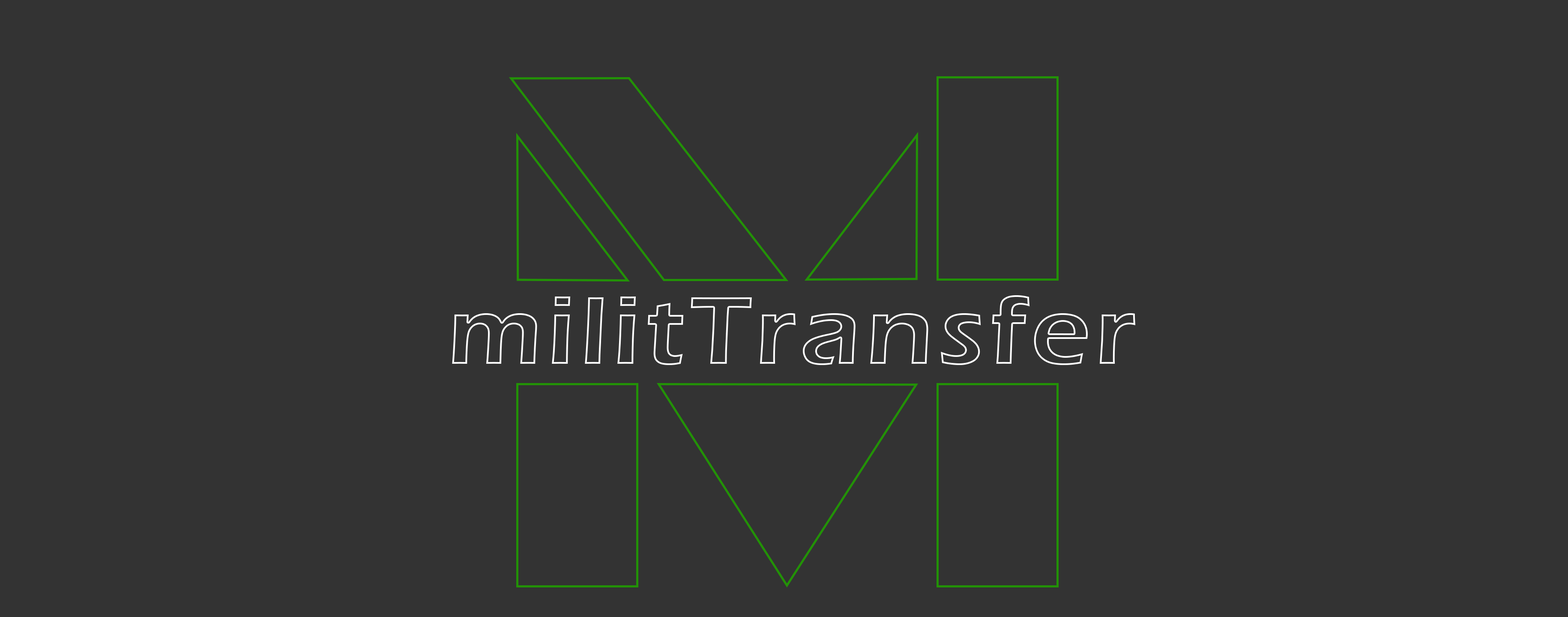
<style>
.page{position:relative;width:1568px;height:617px;background:#333333}
.page>*{position:absolute;margin:0}
.t1{font:99.6px "ErasITC-Demi";letter-spacing:0.04em;scale:1.07 1}
</style>
<div class="page">
<p class="t1" style="left:452px;top:295px;width:683px;height:70px">militTransfer</p>
</div>
